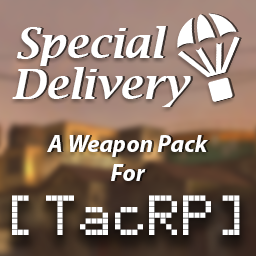
<style>
.page{position:relative;width:256px;height:256px}
.page>*{position:absolute;margin:0}
.t1{font:42px "LucidaBright-DemiItalic";color:#ffffff}
.t2{font:24px "MyriadPro-BoldIt";color:#ffffff}
.t3{font:40px "HD44780A00-5x8";color:#ffffff}
</style>
<div class="page">
<p class="t1" style="left:16px;top:26px;width:150px;height:40px">Special</p>
<p class="t1" style="left:12px;top:67px;width:179px;height:40px">Delivery</p>
<p class="t2" style="left:47px;top:135px;width:161px;height:46px;text-align:center">A Weapon Pack<br>For</p>
<p class="t3" style="left:12px;top:195px;width:228px;height:40px">[TacRP]</p>
</div>
